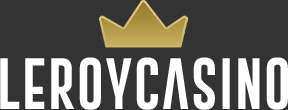
<style>
.page{position:relative;width:288px;height:110px;background:#333333}
.page>*{position:absolute;margin:0}
.t1{font:52.9px "GoboldExtra1";letter-spacing:0.03em;color:#ffffff;text-transform:uppercase}
</style>
<div class="page">
<p class="t1" style="left:0px;top:57px;width:288px;height:53px">LeroyCasino</p>
</div>
